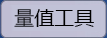
<style>
.page{position:relative;width:107px;height:38px;background:#c1c2d7}
.page>*{position:absolute;margin:0}
.t1{font:20px "MicrosoftYaHei";color:#000000}
</style>
<div class="page">
<p class="t1" style="left:14px;top:9px;width:80px;height:18px">量值工具</p>
</div>
